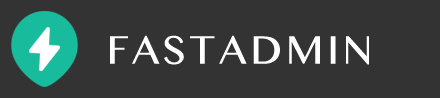
<style>
.page{position:relative;width:440px;height:98px;background:#333333}
.page>*{position:absolute;margin:0}
.t1{font:40px "MyanmarMN";letter-spacing:0.1em;color:#ffffff}
</style>
<div class="page">
<p class="t1" style="left:110px;top:35px;width:259px;height:30px">FASTADMIN</p>
</div>
